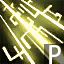
<style>
.page{position:relative;width:64px;height:64px}
.page>*{position:absolute;margin:0}
.t1{font:24px "AdobeFanHeitiStd-Bold";color:#ffffff}
</style>
<div class="page">
<p class="t1" style="left:49px;top:45px;width:12px;height:19px">P</p>
</div>
